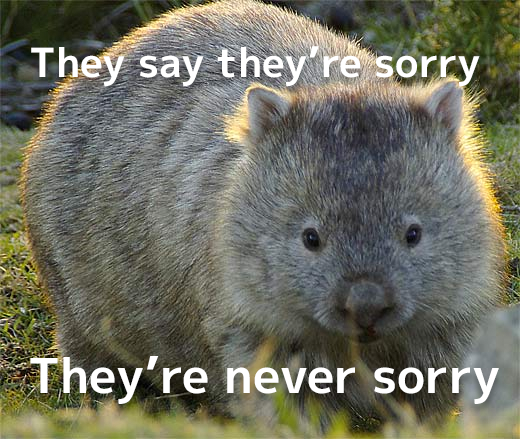
<style>
.page{position:relative;width:520px;height:439px}
.page>*{position:absolute;margin:0}
.t1{font:40px "mplus-2p-bold";color:#ffffff}
.t2{font:48px "mplus-2p-bold";color:#ffffff}
</style>
<div class="page">
<p class="t1" style="left:31px;top:46px;width:449px;height:41px">They say they’re sorry</p>
<p class="t2" style="left:30px;top:356px;width:469px;height:48px">They’re never sorry</p>
</div>
